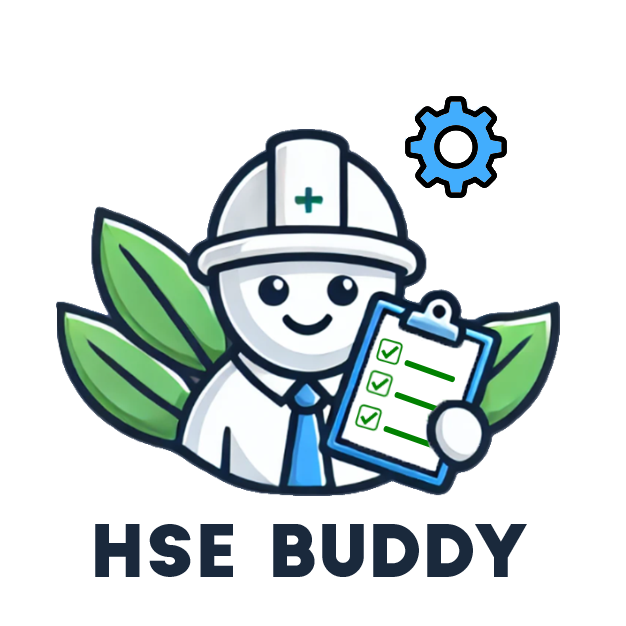
<style>
.page{position:relative;width:626px;height:626px;background:#ffffff}
.page>*{position:absolute;margin:0}
.t1{font:70px "BigJohn";letter-spacing:-0.01em;color:#1a293c}
.t2{font:70px "BigJohn";letter-spacing:-0.01em;color:#1a293c;scale:1.26 1}
</style>
<div class="page">
<p class="t1" style="left:95px;top:524px;width:432px;height:53px">H<span class="t2">S</span>E BUDDY</p>
</div>
